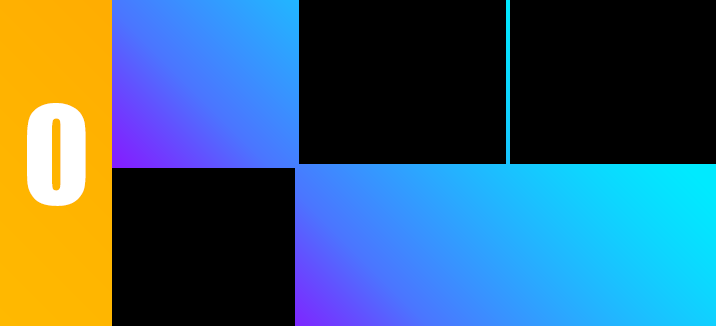
<style>
.page{position:relative;width:716px;height:326px;background:#000000}
.page>*{position:absolute;margin:0}
.t1{font:125px "Impact";color:#ffffff}
</style>
<div class="page">
<p class="t1" style="left:27px;top:103px;width:59px;height:103px">0</p>
</div>
